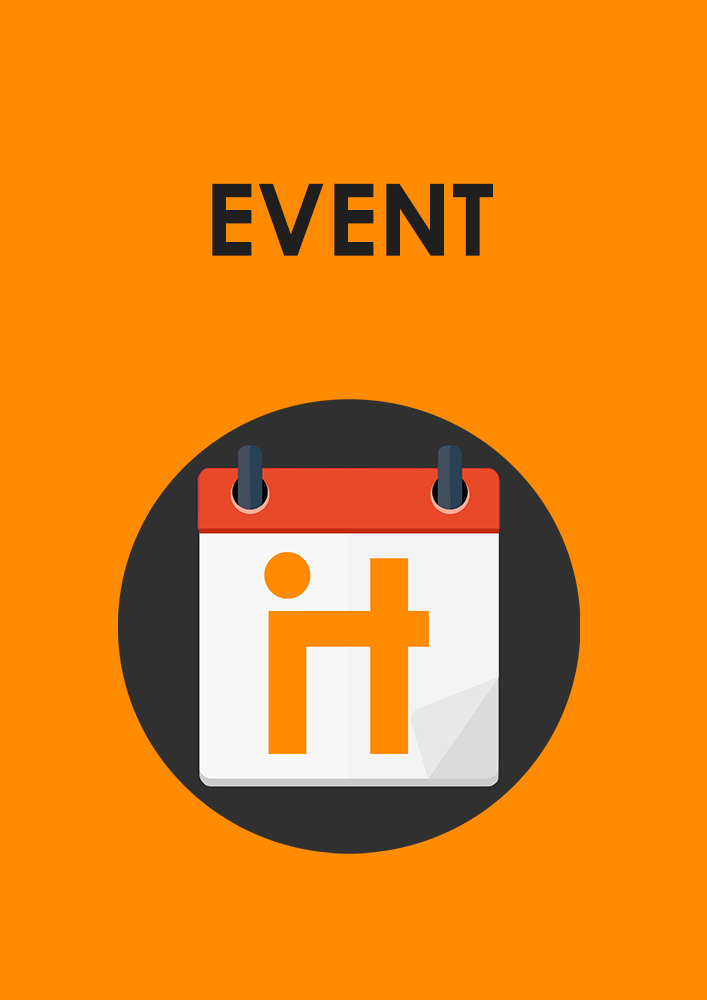
<style>
.page{position:relative;width:707px;height:1000px;background:#ff8c00}
.page>*{position:absolute;margin:0}
.t1{font:100px "CenturyGothic-Bold";color:#1f1f1f}
</style>
<div class="page">
<p class="t1" style="left:212px;top:183px;width:281px;height:73px">EVENT</p>
</div>
